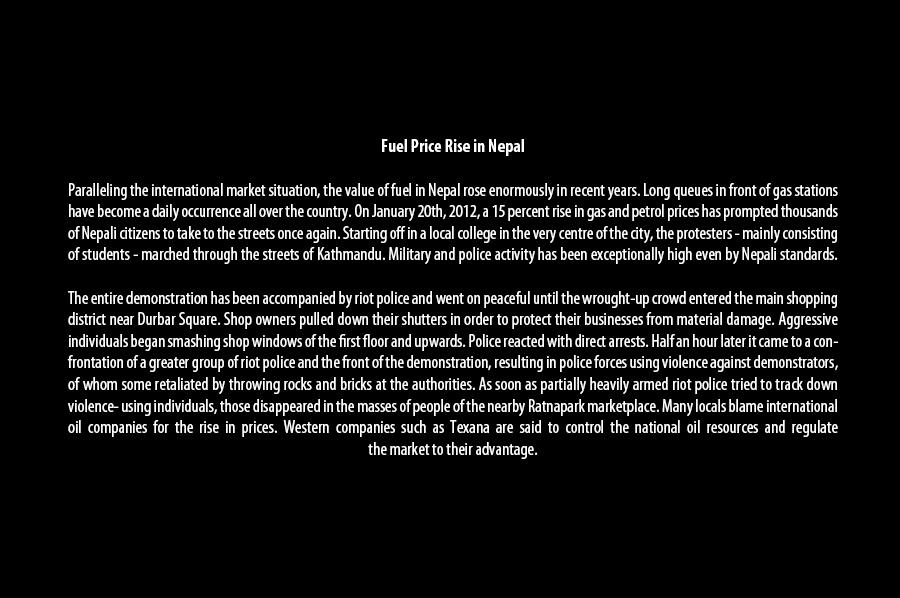
<style>
.page{position:relative;width:900px;height:598px;background:#000000}
.page>*{position:absolute;margin:0}
.t1{font:18px "MyriadPro-Cond";color:#ffffff}
.t2{font:18px "MyriadPro-BoldCond";color:#ffffff}
</style>
<div class="page">
<p class="t1" style="left:67px;top:139px;width:771px;height:320px;text-align:center"><span class="t2">Fuel Price Rise in Nepal<br></span><br>Paralleling the international market situation, the value of fuel in Nepal rose enormously in recent years. Long queues in front of gas stations have become a daily occurrence all over the country. On January 20th, 2012, a 15 percent rise in gas and petrol prices has prompted thousands of Nepali citizens to take to the streets once again. Starting off in a local college in the very centre of the city, the protesters - mainly consisting of students - marched through the streets of Kathmandu. Military and police activity has been exceptionally high even by Nepali standards.<br><br>The entire demonstration has been accompanied by riot police and went on peaceful until the wrought-up crowd entered the main shopping district near Durbar Square. Shop owners pulled down their shutters in order to protect their businesses from material damage. Aggressive individuals began smashing shop windows of the first floor and upwards. Police reacted with direct arrests. Half an hour later it came to a confrontation of a greater group of riot police and the front of the demonstration, resulting in police forces using violence against demonstrators, of whom some retaliated by throwing rocks and bricks at the authorities. As soon as partially heavily armed riot police tried to track down violence- using individuals, those disappeared in the masses of people of the nearby Ratnapark marketplace. Many locals blame international oil companies for the rise in prices. Western companies such as Texana are said to control the national oil resources and regulate <br>the market to their advantage.</p>
</div>
